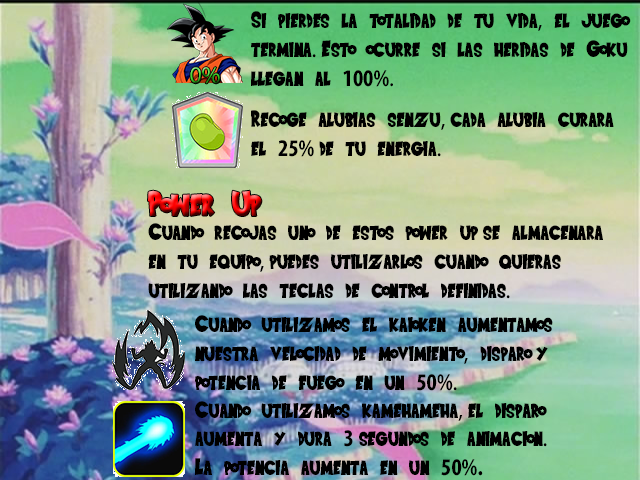
<style>
.page{position:relative;width:640px;height:480px}
.page>*{position:absolute;margin:0}
.t1{font:24px "SaiyanSans";color:#000000}
.t2{font:24px "MyriadPro-Regular";color:#000000}
.t3{font:24px "MyriadPro-BoldCond";color:#000000}
.t4{font:24px "MyriadPro-Regular"}
.t5{font:36px "SaiyanSans"}
</style>
<div class="page">
<p class="t1" style="left:251px;top:11px;width:380px;height:76px">Si pierdes la totalidad de tu vida<span class="t2">,</span> el juego termina<span class="t2">. </span>Esto ocurre si las heridas de Goku llegan al <span class="t3">100%</span><span class="t2">.</span></p>
<p class="t4" style="left:190px;top:67px;width:30px;height:17px">0%</p>
<p class="t1" style="left:251px;top:110px;width:363px;height:47px">Recoge alubias senzu<span class="t2">, </span>cada alubia curara el <span class="t3">25% </span>de tu energia<span class="t2">.</span></p>
<p class="t5" style="left:148px;top:190px;width:114px;height:26px">Power Up</p>
<p class="t1" style="left:148px;top:223px;width:455px;height:76px">Cuando recojas uno de estos power up se almacenara en tu equipo<span class="t2">, </span>puedes utilizarlos cuando quieras   utilizando las teclas de control definidas<span class="t2">.</span></p>
<p class="t1" style="left:195px;top:315px;width:358px;height:76px">Cuando utilizamos el kaioken aumentamos nuestra velocidad de movimiento<span class="t2">,</span> disparo y   potencia de fuego en un <span class="t3">50%</span><span class="t2">.</span></p>
<p class="t1" style="left:195px;top:401px;width:352px;height:75px">Cuando utilizamos kamehameha<span class="t2">, </span>el disparo aumenta y dura <span class="t3">3 </span>segundos de animacion<span class="t2">. </span>La potencia aumenta en un <span class="t3">50%.</span></p>
</div>
